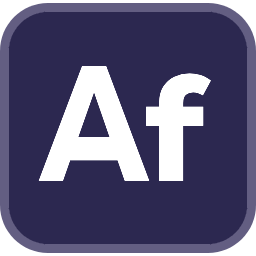
<style>
.page{position:relative;width:256px;height:256px;background:#2c2850}
.page>*{position:absolute;margin:0}
.t1{font:163.5px "Nexa-Heavy";color:#ffffff;scale:0.84 1}
.t2{font:150.1px "Nexa-Heavy";color:#ffffff}
</style>
<div class="page">
<p class="t1" style="left:38px;top:66px;width:112px;height:115px">A</p>
<p class="t2" style="left:146px;top:73px;width:65px;height:108px">f</p>
</div>
